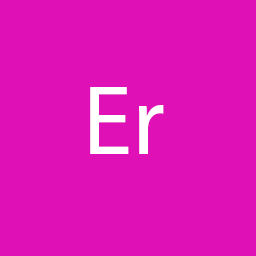
<style>
.page{position:relative;width:256px;height:256px;background:#df10b6}
.page>*{position:absolute;margin:0}
.t1{font:100px "MyriadPro-Regular";color:#ffffff}
</style>
<div class="page">
<p class="t1" style="left:90px;top:87px;width:74px;height:67px">Er</p>
</div>
